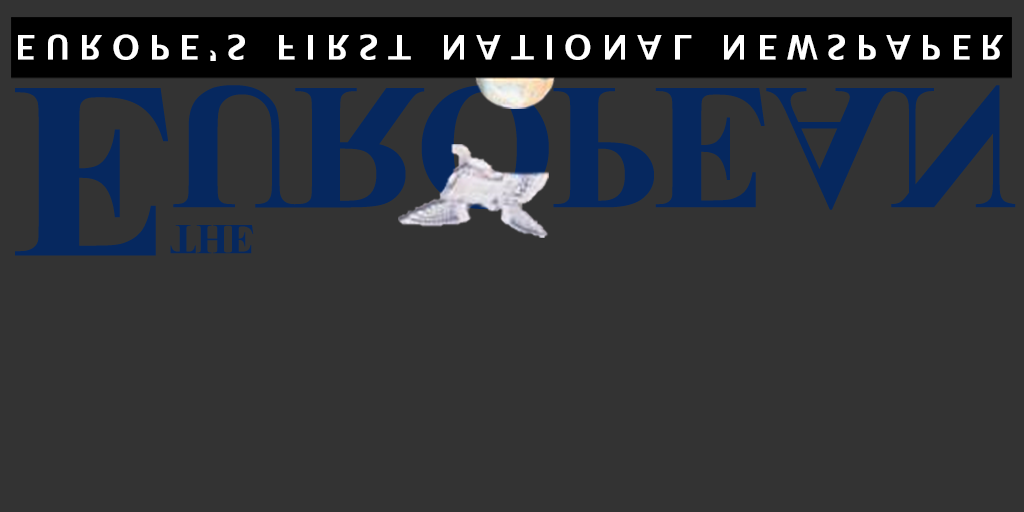
<style>
.page{position:relative;width:1024px;height:512px;background:#333333}
.page>*{position:absolute;margin:0}
.t1{font:33.7px "LucidaSans-Demi";letter-spacing:0.28em;color:#ffffff}
.t2{font:179.9px/68.9px "TimesNewRomanPS-BoldMT";letter-spacing:-0.04em;color:#06285f}
.t3{font:42.2px/68.9px "TimesNewRomanPS-BoldMT";letter-spacing:-0.04em;color:#06285f}
.t4{font:253px/68.9px "TimesNewRomanPS-BoldMT";letter-spacing:-0.04em;color:#06285f}
</style>
<div class="page">
<p class="t1" style="left:18px;top:34px;width:985px;height:27px">EUROPE’S FIRST NATIONAL NEWSPAPER</p>
<p class="t2" style="left:15px;top:85px;width:1001px;height:171px"><span class="t3">                  THE<br><br></span><span class="t4">E</span>UROPEAN</p>
</div>
